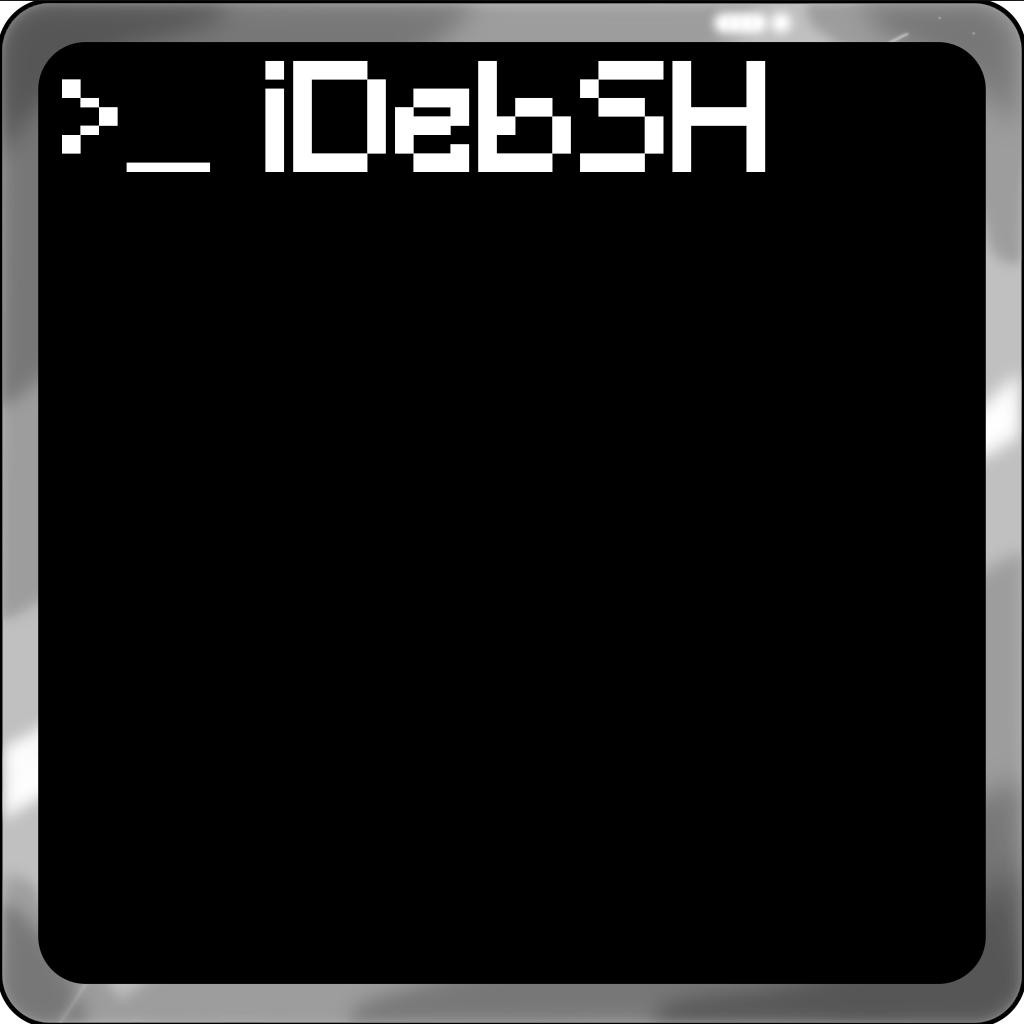
<style>
.page{position:relative;width:1024px;height:1024px;background:#000000}
.page>*{position:absolute;margin:0}
.t1{font:148px "Minecraft-Regular";color:#ffffff}
</style>
<div class="page">
<p class="t1" style="left:62px;top:59px;width:704px;height:112px">&gt;_ iDebSH</p>
</div>
